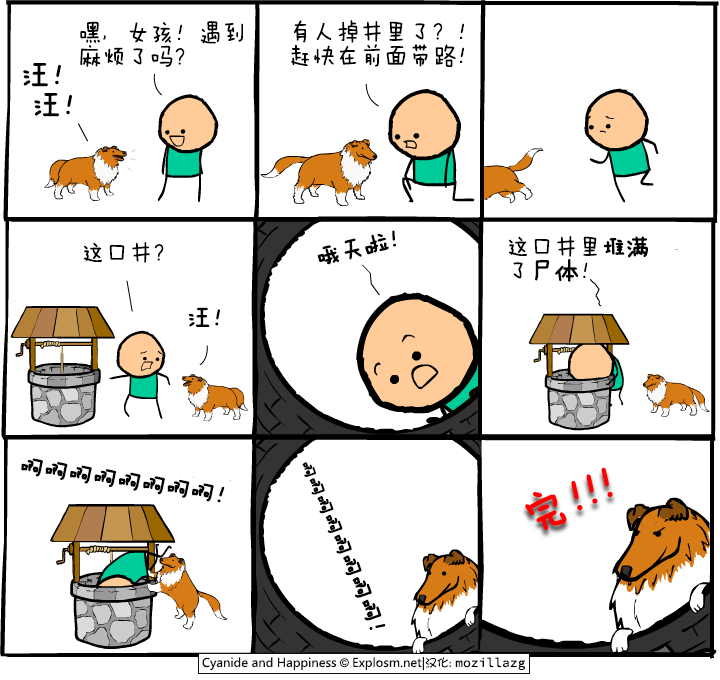
<style>
.page{position:relative;width:720px;height:680px;background:#ffffff}
.page>*{position:absolute;margin:0}
.t1{font:24px/24px "FZMWJW--GB1-0";color:#000000}
.t2{font:29px/30px "FZMWJW--GB1-0";color:#000000;font-weight:bold}
.t3{font:24px "FZMWJW--GB1-0";color:#000000;font-weight:bold}
.t4{font:24px "FZMWJW--GB1-0";color:#000000}
.t5{font:24px/24px "FZMWJW--GB1-0";color:#000000;font-weight:bold}
.t6{font:17px "FZMWJW--GB1-0";color:#000000;font-weight:bold}
.t7{font:19px "FZMWJW--GB1-0";color:#000000;font-weight:bold}
.t8{font:20px "FZMWJW--GB1-0";color:#000000;font-weight:bold}
.t9{font:21px "FZMWJW--GB1-0";color:#000000;font-weight:bold}
.t10{font:22px "FZMWJW--GB1-0";color:#000000;font-weight:bold}
.t11{font:23px "FZMWJW--GB1-0";color:#000000;font-weight:bold}
.t12{font:45px "FZMWJW--GB1-0";letter-spacing:-0.66em;color:#ff0000;font-weight:bold}
.t13{font:45px "FZMWJW--GB1-0";color:#ff0000;font-weight:bold}
</style>
<div class="page">
<p class="t1" style="left:80px;top:21px;width:163px;height:46px">嘿，女孩！遇到<br>麻烦了吗？</p>
<p class="t1" style="left:291px;top:20px;width:173px;height:47px">有人掉井里了？！<br>赶快在前面带路！</p>
<p class="t2" style="left:23px;top:63px;width:49px;height:54px">汪！<br> 汪！</p>
<p class="t3" style="left:317px;top:230px;width:79px;height:35px;rotate:-14deg">哦天啦！</p>
<p class="t4" style="left:84px;top:242px;width:80px;height:21px">这口井？</p>
<p class="t1" style="left:509px;top:236px;width:139px;height:46px">这口井里<span class="t5">堆满<br></span>了<span class="t5">尸体</span>！</p>
<p class="t3" style="left:188px;top:307px;width:32px;height:20px">汪！</p>
<p class="t3" style="left:21px;top:458px;width:204px;height:45px;rotate:8deg">啊啊啊啊啊啊啊啊！</p>
<p class="t3" style="left:302px;top:462px;width:84px;height:168px;rotate:67deg"><span class="t6">啊</span><span class="t7">啊</span><span class="t8">啊</span><span class="t9">啊</span><span class="t10">啊</span><span class="t11">啊</span>啊啊！</p>
<p class="t12" style="left:525px;top:467px;width:88px;height:63px;rotate:-24deg"><span class="t13">完</span>！！！</p>
</div>
